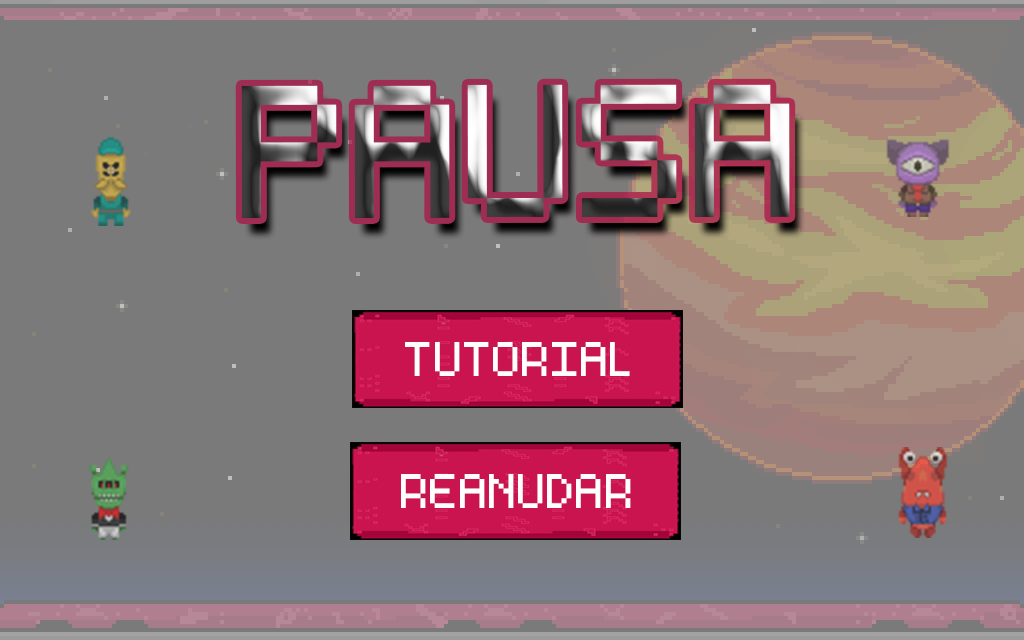
<style>
.page{position:relative;width:1024px;height:640px;background:#7a7a7a}
.page>*{position:absolute;margin:0}
.t1{font:77.6px "Essential";color:#fefefe}
</style>
<div class="page">
<p class="t1" style="left:405px;top:342px;width:225px;height:34px">TUTORIAL</p>
<p class="t1" style="left:401px;top:474px;width:230px;height:34px">REANUDAR</p>
</div>
